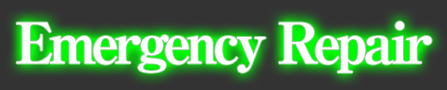
<style>
.page{position:relative;width:447px;height:90px;background:#333333}
.page>*{position:absolute;margin:0}
.t1{font:56px "RyuminPro-ExBold";letter-spacing:-0.08em;color:#ffffff}
</style>
<div class="page">
<p class="t1" style="left:16px;top:21px;width:416px;height:52px">Emergency Repair</p>
</div>
